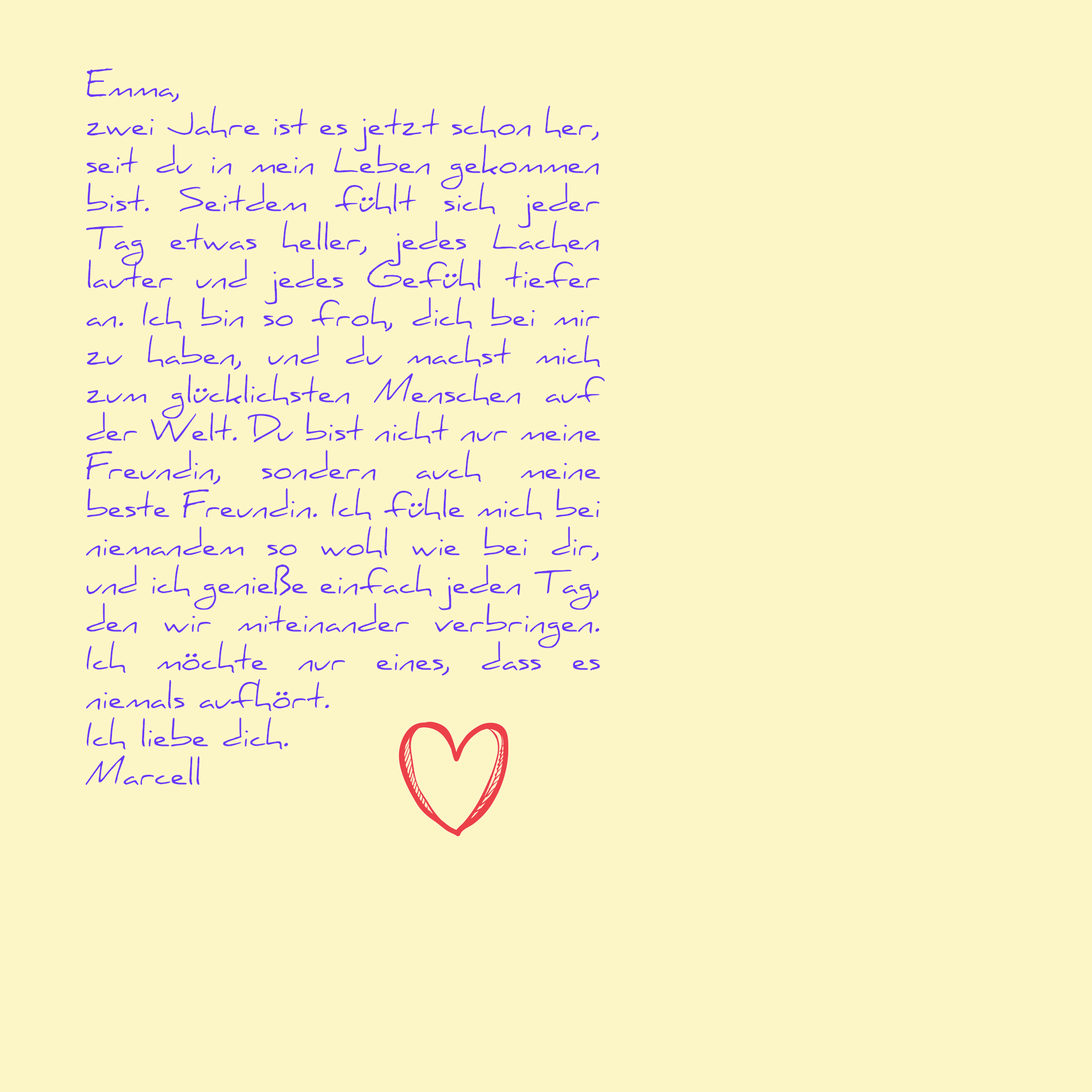
<style>
.page{position:relative;width:1092px;height:1092px;background:#fcf6c7}
.page>*{position:absolute;margin:0}
.t1{font:31.8px "Daniel";color:#6937f8}
</style>
<div class="page">
<p class="t1" style="left:86px;top:68px;width:519px;height:717px;text-align:justify">Emma, <br>zwei Jahre ist es jetzt schon her, seit du in mein Leben gekommen bist. Seitdem fühlt sich jeder Tag etwas heller, jedes Lachen lauter und jedes Gefühl tiefer an. Ich bin so froh, dich bei mir zu haben, und du machst mich zum glücklichsten Menschen auf der Welt. Du bist nicht nur meine Freundin, sondern auch meine beste Freundin. Ich fühle mich bei niemandem so wohl wie bei dir, und ich genieße einfach jeden Tag, den wir miteinander verbringen. Ich möchte nur eines, dass es niemals aufhört.<br>Ich liebe dich.<br>Marcell</p>
</div>
